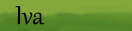
<style>
.page{position:relative;width:132px;height:31px}
.page>*{position:absolute;margin:0}
.t1{font:32px "Gabriola";color:#000000}
</style>
<div class="page">
<p class="t1" style="left:15px;top:6px;width:30px;height:19px">Iva</p>
</div>
